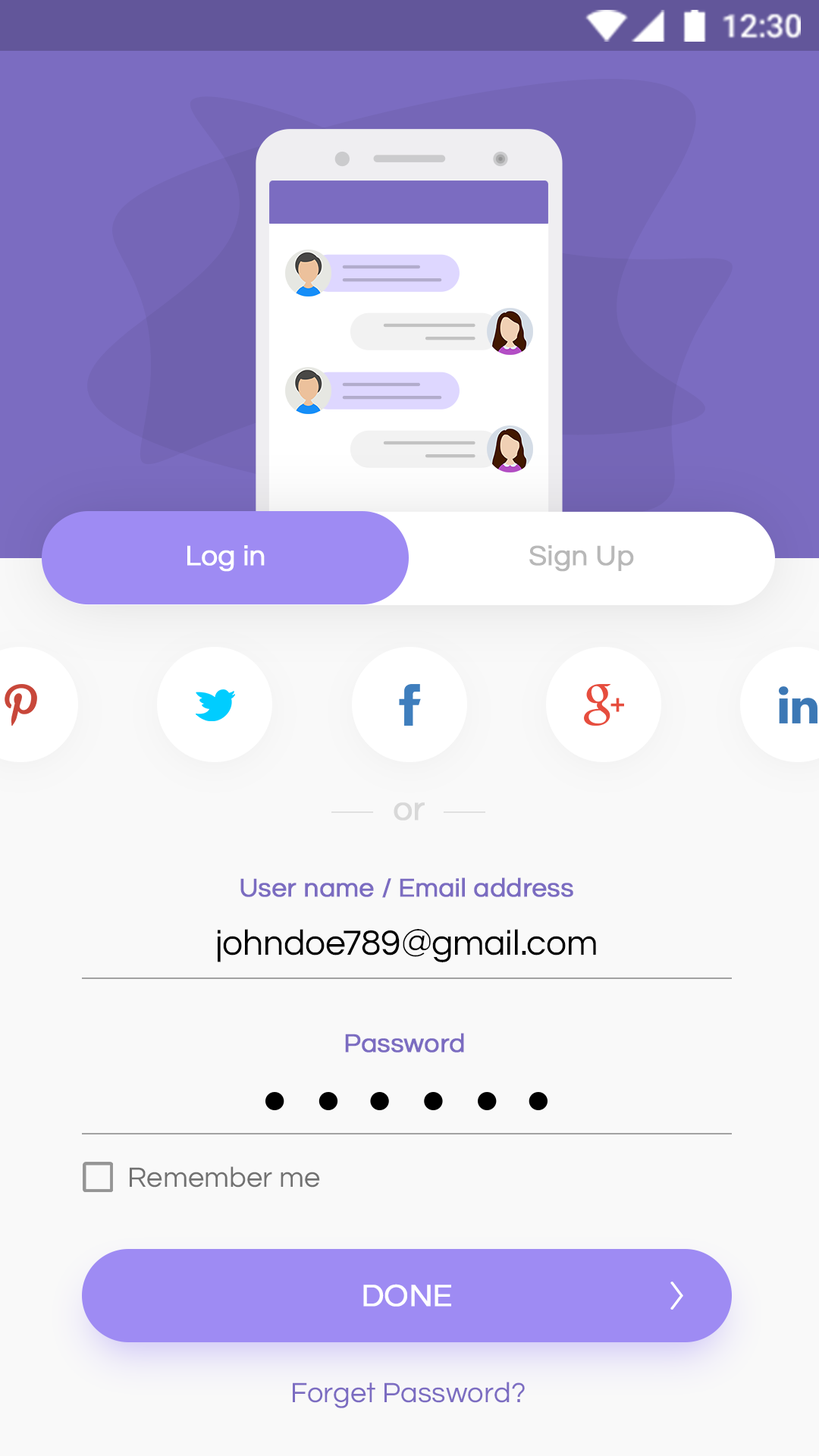
<style>
.page{position:relative;width:819px;height:1456px;background:#f9f9f9}
.page>*{position:absolute;margin:0}
.t1{font:28.8px "Questrial-Regular";letter-spacing:0.005em;color:#ffffff;font-weight:bold}
.t2{font:28.8px "Questrial-Regular";letter-spacing:0.005em;color:#b8b8b8;font-weight:bold}
.t3{font:34.1px "Questrial-Regular";letter-spacing:0.005em;color:#d8d8d8;font-weight:bold}
.t4{font:26.5px "Questrial-Regular";letter-spacing:0.005em;color:#7b6cc1;font-weight:bold}
.t5{font:36.4px "Questrial-Regular";letter-spacing:0.005em;color:#000000}
.t6{font:28.8px "Questrial-Regular";letter-spacing:0.005em;color:#717171}
.t7{font:31.8px "Questrial-Regular";letter-spacing:0.005em;color:#ffffff;font-weight:bold}
.t8{font:28.8px "Questrial-Regular";letter-spacing:0.005em;color:#7b6cc1}
</style>
<div class="page">
<p class="t1" style="left:187px;top:545px;width:78px;height:27px">Log in</p>
<p class="t2" style="left:529px;top:545px;width:105px;height:27px">Sign Up</p>
<p class="t3" style="left:394px;top:802px;width:31px;height:19px">or</p>
<p class="t4" style="left:240px;top:877px;width:333px;height:21px">User name / Email address</p>
<p class="t5" style="left:218px;top:929px;width:378px;height:33px">johndoe789@gmail.com</p>
<p class="t4" style="left:345px;top:1033px;width:119px;height:20px">Password</p>
<p class="t6" style="left:130px;top:1166px;width:190px;height:22px">Remember me</p>
<p class="t7" style="left:363px;top:1284px;width:88px;height:23px">DONE</p>
<p class="t8" style="left:293px;top:1382px;width:232px;height:26px">Forget Password?</p>
</div>
